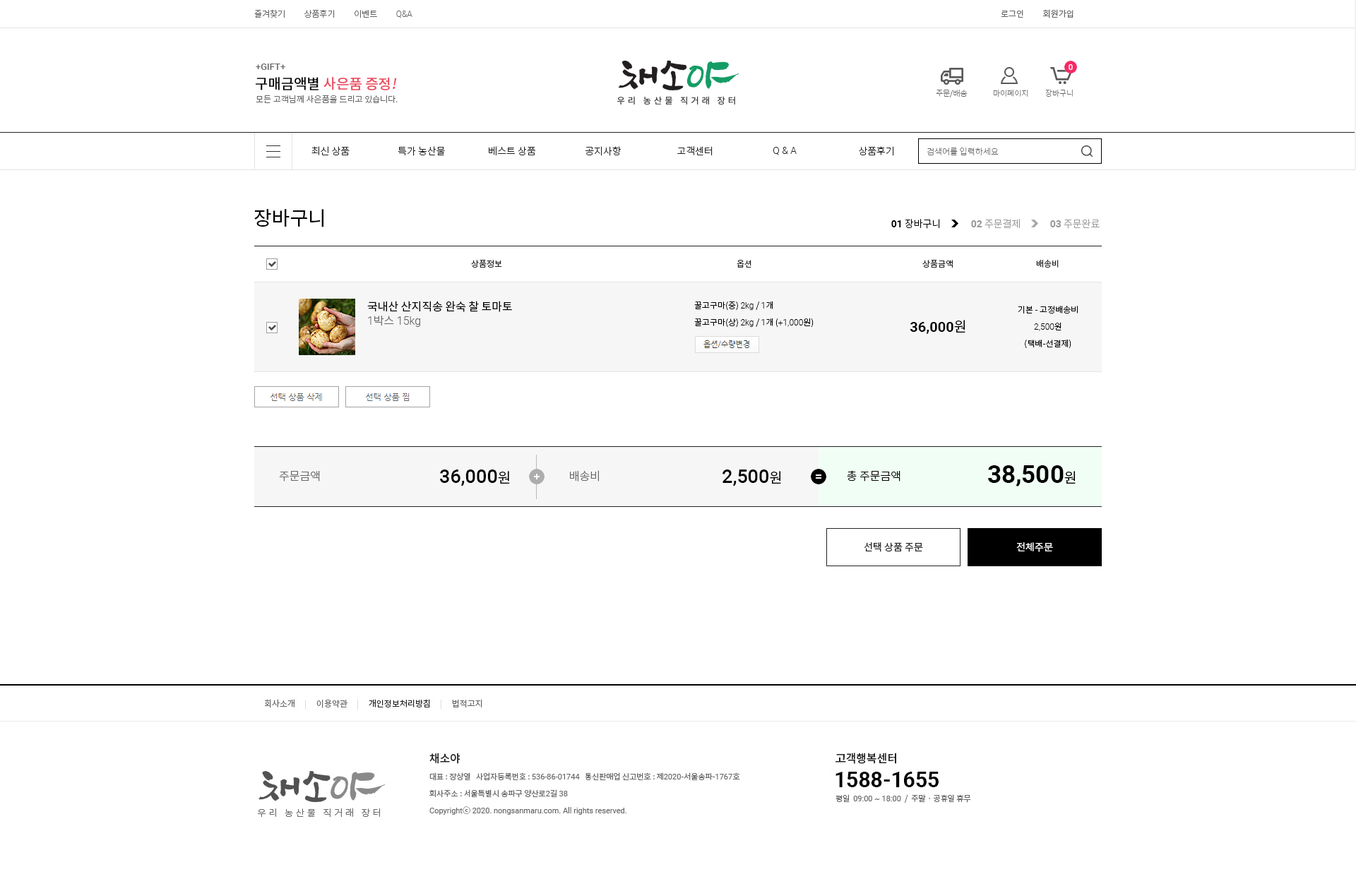
<style>
.page{position:relative;width:1356px;height:879px;background:#ffffff}
.page>*{position:absolute;margin:0}
.t1{font:8.5px "NotoSansCJKkr-Light";color:#666666}
.t2{font:8.5px "Roboto-Light";color:#666666}
.t3{font:8.5px "NotoSansCJKkr-DemiLight";color:#666666}
.t4{font:9.2px "Roboto-Medium";color:#666666}
.t5{font:14.1px "NotoSansCJKkr-Medium";color:#ea475c}
.t6{font:14.1px "NotoSansCJKkr-Medium";color:#000000}
.t7{font:14.1px "NotoSansCJKkr-Medium";color:#ea475c;font-style:italic}
.t8{font:7.8px "NotoSansCJKkr-Thin";color:#666666}
.t9{font:9.9px "NotoSansCJKkr-Light";color:#222222}
.t10{font:9.9px "Roboto-Light";color:#222222}
.t11{font:8.5px "NotoSansCJKkr-Thin";color:#666666}
.t12{font:19.8px "NotoSansCJKkr-Regular";color:#000000}
.t13{font:9.9px "NotoSansCJKkr-Light";color:#000000}
.t14{font:9.9px "Roboto-Bold";color:#000000}
.t15{font:9.9px "NotoSansCJKkr-Light";color:#999999}
.t16{font:9.9px "Roboto-Bold";color:#999999}
.t17{font:8.5px "NotoSansCJKkr-Regular";color:#222222}
.t18{font:11.3px "NotoSansCJKkr-Regular";color:#000000}
.t19{font:8.5px/17px "NotoSansCJKkr-Light";color:#000000}
.t20{font:8.5px/17px "Roboto-Light";color:#000000}
.t21{font:11.3px "Roboto-Light";color:#666666}
.t22{font:11.3px "NotoSansCJKkr-Light";color:#666666}
.t23{font:14.1px "Roboto-Bold";color:#000000}
.t24{font:14.1px "NotoSansCJKkr-DemiLight";color:#000000}
.t25{font:19.1px "Roboto-Medium";color:#000000}
.t26{font:11.3px "NotoSansCJKkr-Light";color:#000000}
.t27{font:24.7px "Roboto-Bold";color:#000000}
.t28{font:9.9px "NotoSansCJKkr-DemiLight";color:#222222}
.t29{font:9.9px "NotoSansCJKkr-DemiLight";color:#ffffff}
</style>
<div class="page">
<p class="t1" style="left:254px;top:9px;width:158px;height:9px">즐겨찾기          상품후기          이벤트          <span class="t2">Q&amp;A</span></p>
<p class="t3" style="left:1001px;top:9px;width:73px;height:9px">로그인          회원가입</p>
<p class="t4" style="left:256px;top:64px;width:29px;height:6px">+GIFT+</p>
<p class="t5" style="left:256px;top:77px;width:141px;height:13px"><span class="t6">구매금액별 </span>사은품 증정<span class="t7">!</span></p>
<p class="t8" style="left:936px;top:89px;width:32px;height:8px">주문/배송</p>
<p class="t8" style="left:993px;top:90px;width:35px;height:7px">마이페이지</p>
<p class="t8" style="left:1045px;top:89px;width:28px;height:8px">장바구니</p>
<p class="t1" style="left:256px;top:95px;width:142px;height:8px">모든 고객님께 사은품을 드리고 있습니다.</p>
<p class="t9" style="left:311px;top:146px;width:39px;height:9px">최신 상품</p>
<p class="t9" style="left:398px;top:146px;width:47px;height:10px">특가 농산물</p>
<p class="t9" style="left:489px;top:146px;width:47px;height:10px">베스트 상품</p>
<p class="t9" style="left:586px;top:146px;width:36px;height:10px">공지사항</p>
<p class="t9" style="left:677px;top:146px;width:36px;height:10px">고객센터</p>
<p class="t10" style="left:773px;top:147px;width:24px;height:8px">Q &amp; A</p>
<p class="t9" style="left:859px;top:146px;width:35px;height:10px">상품후기</p>
<p class="t11" style="left:927px;top:147px;width:72px;height:9px">검색어를 입력하세요</p>
<p class="t12" style="left:254px;top:209px;width:69px;height:18px">장바구니</p>
<p class="t13" style="left:891px;top:219px;width:49px;height:10px"><span class="t14">01</span> 장바구니</p>
<p class="t15" style="left:971px;top:219px;width:49px;height:10px"><span class="t16">02</span> 주문결제</p>
<p class="t15" style="left:1050px;top:219px;width:50px;height:10px"><span class="t16">03</span> 주문완료</p>
<p class="t17" style="left:471px;top:260px;width:31px;height:8px">상품정보</p>
<p class="t17" style="left:737px;top:260px;width:14px;height:8px">옵션</p>
<p class="t17" style="left:922px;top:260px;width:31px;height:8px">상품금액</p>
<p class="t17" style="left:1036px;top:259px;width:23px;height:9px">배송비</p>
<p class="t18" style="left:367px;top:301px;width:145px;height:11px">국내산 산지직송 완숙 찰 토마토</p>
<p class="t19" style="left:694px;top:301px;width:120px;height:27px">꿀고구마(중) <span class="t20">2kg</span> / <span class="t20">1</span>개<br>꿀고구마(상) <span class="t20">2kg</span> / <span class="t20">1</span>개 (<span class="t20">+1,000</span>원)</p>
<p class="t19" style="left:1018px;top:306px;width:60px;height:43px;text-align:center">기본 - 고정배송비<br><span class="t20">2,500</span>원<br>(택배-선결제)</p>
<p class="t21" style="left:368px;top:316px;width:52px;height:11px">1<span class="t22">박스 </span>15kg</p>
<p class="t23" style="left:910px;top:320px;width:55px;height:14px">36,000<span class="t24">원</span></p>
<p class="t22" style="left:279px;top:471px;width:41px;height:11px">주문금액</p>
<p class="t25" style="left:440px;top:470px;width:70px;height:17px">36,000<span class="t24">원</span></p>
<p class="t22" style="left:570px;top:470px;width:29px;height:12px">배송비</p>
<p class="t25" style="left:723px;top:470px;width:58px;height:17px">2,500<span class="t24">원</span></p>
<p class="t26" style="left:847px;top:470px;width:54px;height:12px">총 주문금액</p>
<p class="t27" style="left:988px;top:465px;width:88px;height:22px">38,500<span class="t24">원</span></p>
<p class="t28" style="left:864px;top:542px;width:59px;height:10px">선택 상품 주문</p>
<p class="t29" style="left:1016px;top:542px;width:37px;height:10px">전체주문</p>
</div>
